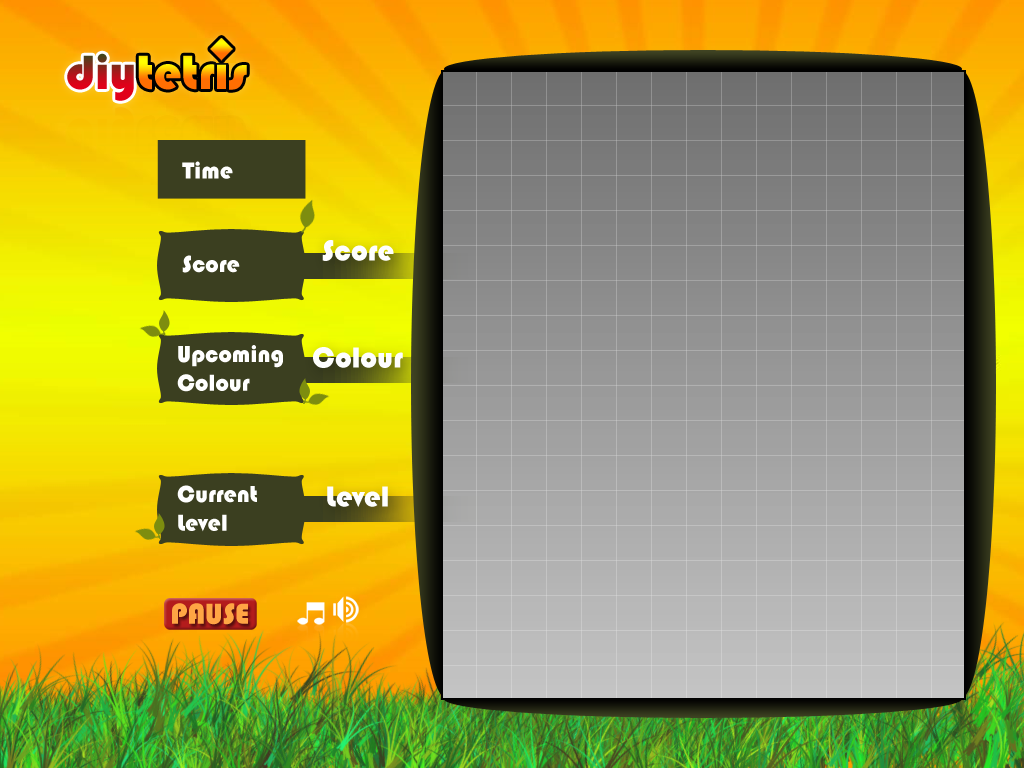
<style>
.page{position:relative;width:1024px;height:768px}
.page>*{position:absolute;margin:0}
.t1{font:24px "Bauhaus93";color:#ffffff}
.t2{font:30px "Bauhaus93";color:#fefefe}
.t3{font:29.9px "Bauhaus93";color:#ffa544}
</style>
<div class="page">
<p class="t1" style="left:182px;top:161px;width:51px;height:18px">Time</p>
<p class="t2" style="left:322px;top:240px;width:72px;height:21px">Score</p>
<p class="t1" style="left:182px;top:255px;width:58px;height:18px">Score</p>
<p class="t1" style="left:177px;top:345px;width:106px;height:47px">Upcoming<br>Colour</p>
<p class="t2" style="left:313px;top:347px;width:90px;height:21px">Colour</p>
<p class="t1" style="left:177px;top:485px;width:80px;height:47px">Current<br>Level</p>
<p class="t2" style="left:327px;top:486px;width:61px;height:21px">Level</p>
<p class="t3" style="left:172px;top:603px;width:76px;height:22px">PAUSE</p>
</div>
